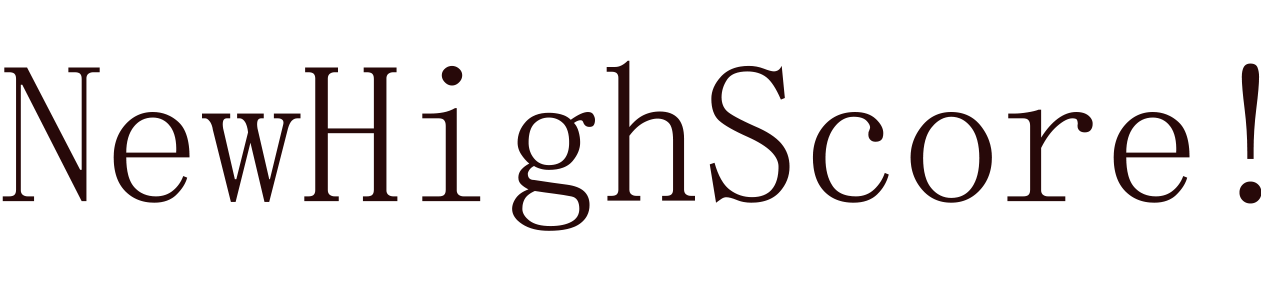
<style>
.page{position:relative;width:1261px;height:296px;background:#ffffff}
.page>*{position:absolute;margin:0}
.t1{font:200px "SimSun-ExtB";color:#270909}
</style>
<div class="page">
<p class="t1" style="left:2px;top:60px;width:1260px;height:171px">NewHighScore!</p>
</div>
